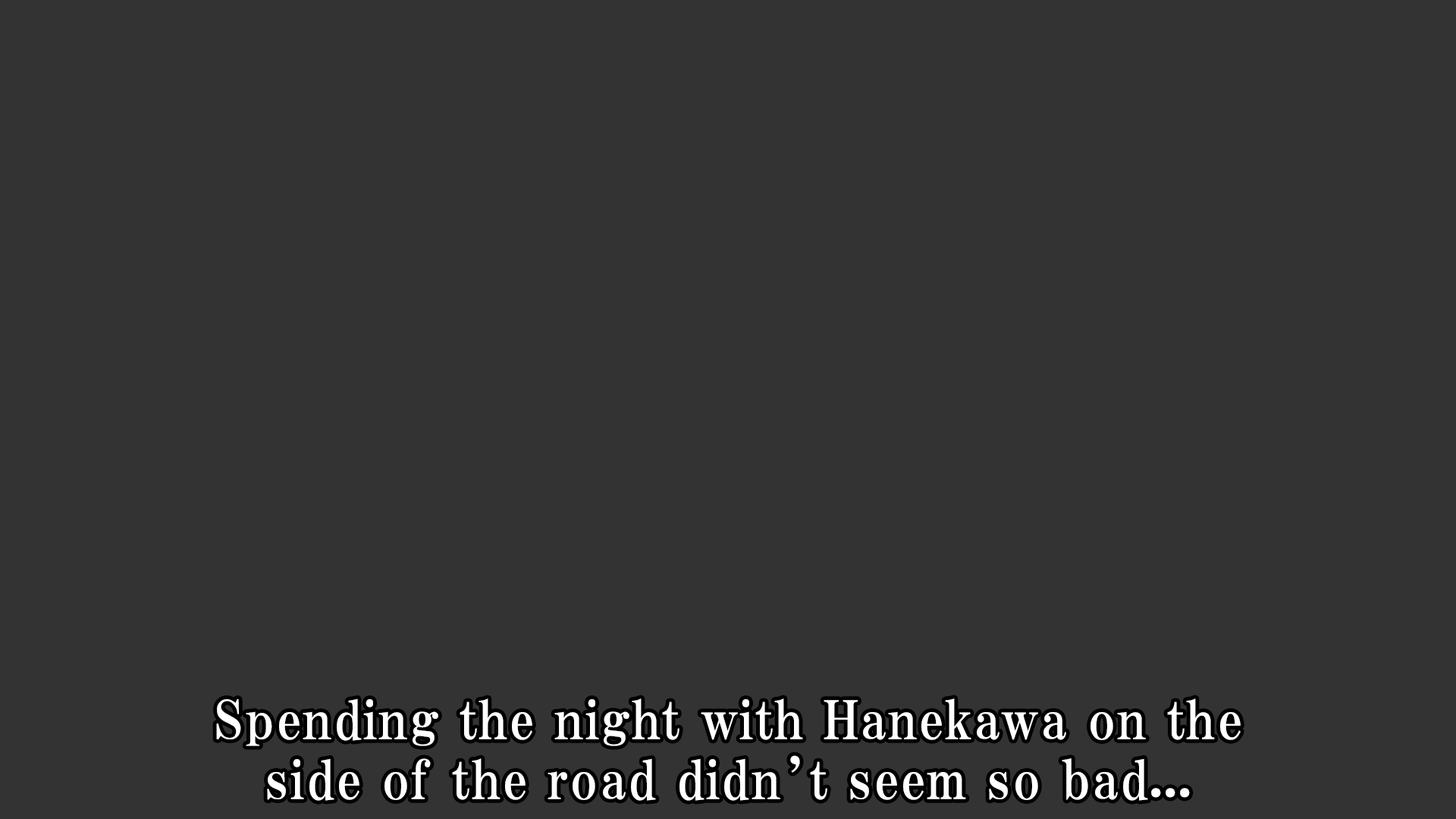
<style>
.page{position:relative;width:1456px;height:819px;background:#333333}
.page>*{position:absolute;margin:0}
.t1{font:53.1px/59.9px "HGPMinchoE";letter-spacing:0.025em;color:#ffffff}
</style>
<div class="page">
<p class="t1" style="left:216px;top:698px;width:1025px;height:103px;text-align:center">Spending the night with Hanekawa on the<br>side of the road didn’t seem so bad...</p>
</div>
